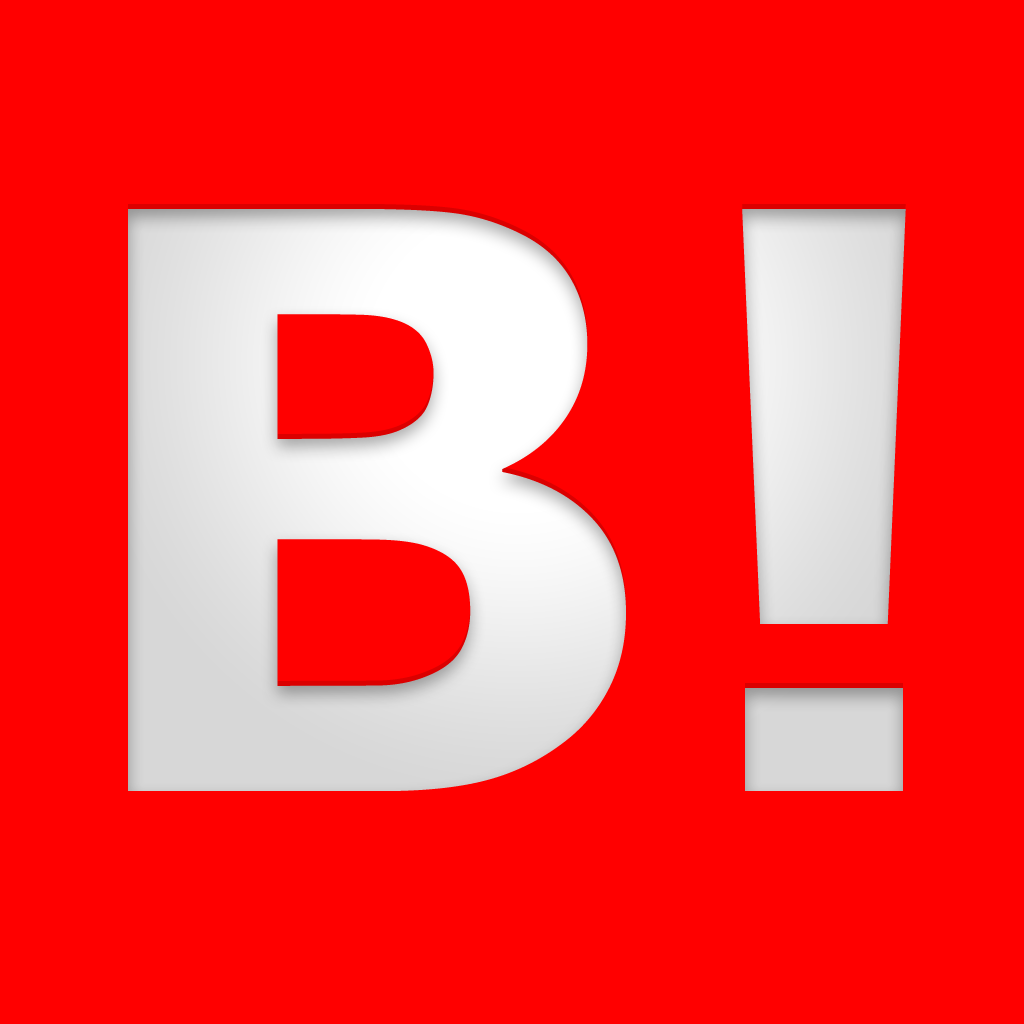
<style>
.page{position:relative;width:1024px;height:1024px;background:#ff0000}
.page>*{position:absolute;margin:0}
.t1{font:800px "Verdana-Bold";color:#e3e3e3}
</style>
<div class="page">
<p class="t1" style="left:128px;top:209px;width:778px;height:582px">B!</p>
</div>
